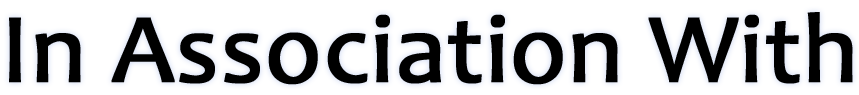
<style>
.page{position:relative;width:859px;height:95px;background:#ffffff}
.page>*{position:absolute;margin:0}
.t1{font:99.6px "Candara";color:#000000;font-weight:bold}
</style>
<div class="page">
<p class="t1" style="left:9px;top:12px;width:844px;height:73px">In Association With</p>
</div>
